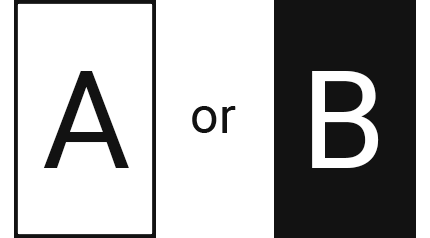
<style>
.page{position:relative;width:430px;height:238px;background:#ffffff}
.page>*{position:absolute;margin:0}
.t1{font:136.2px "Roboto-Regular";color:#121212}
.t2{font:136.2px "Roboto-Regular";color:#ffffff}
.t3{font:50px "Roboto-Regular";color:#121212}
</style>
<div class="page">
<p class="t1" style="left:43px;top:71px;width:86px;height:97px">A</p>
<p class="t2" style="left:312px;top:71px;width:67px;height:97px">B</p>
<p class="t3" style="left:192px;top:106px;width:44px;height:27px">or</p>
</div>
